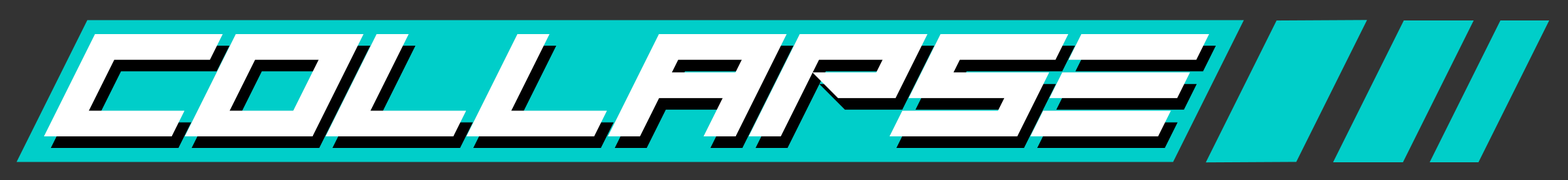
<style>
.page{position:relative;width:1568px;height:180px;background:#00cec9}
.page>*{position:absolute;margin:0}
.t1{font:102px "Vermin-Vibes-Slant";color:#ffffff}
</style>
<div class="page">
<p class="t1" style="left:44px;top:34px;width:1166px;height:102px">COLLAPSE</p>
</div>
